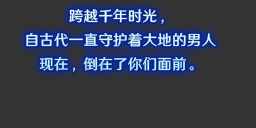
<style>
.page{position:relative;width:256px;height:128px;background:#333333}
.page>*{position:absolute;margin:0}
.t1{font:14.7px/24px "HYWenHei-FEW";letter-spacing:0.005em;color:#cdf7ff}
</style>
<div class="page">
<p class="t1" style="left:26px;top:8px;width:190px;height:64px;text-align:center">跨越千年时光，<br>自古代一直守护着大地的男人<br>现在，倒在了你们面前。</p>
</div>
